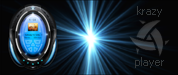
<style>
.page{position:relative;width:178px;height:75px}
.page>*{position:absolute;margin:0}
.t1{font:11px/17px "Tahoma";color:#333738}
</style>
<div class="page">
<p class="t1" style="left:135px;top:6px;width:29px;height:62px;text-align:center">krazy<br><br><br>player</p>
</div>
